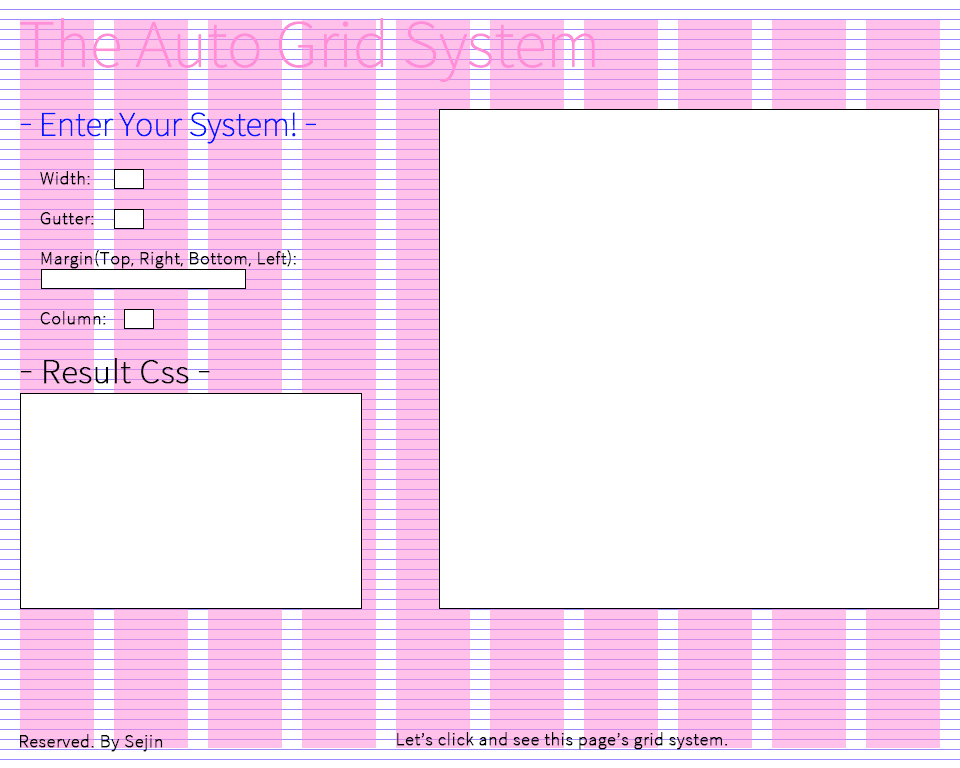
<style>
.page{position:relative;width:960px;height:768px;background:#ffffff}
.page>*{position:absolute;margin:0}
.t1{font:61px "SpoqaHanSans-Thin";letter-spacing:-0.005em;color:#ff8dd8}
.t2{font:31.2px "SpoqaHanSans-Thin";letter-spacing:-0.005em;color:#0618ff}
.t3{font:16px "SpoqaHanSans-Thin";letter-spacing:-0.005em;color:#000000;font-weight:bold}
.t4{font:31.2px "SpoqaHanSans-Thin";letter-spacing:-0.005em;color:#000000;font-weight:bold}
</style>
<div class="page">
<p class="t1" style="left:20px;top:18px;width:575px;height:64px">The Auto Grid System</p>
<p class="t2" style="left:20px;top:112px;width:296px;height:32px">- Enter Your System! -</p>
<p class="t3" style="left:40px;top:171px;width:50px;height:14px">Width:</p>
<p class="t3" style="left:40px;top:212px;width:54px;height:13px">Gutter:</p>
<p class="t3" style="left:41px;top:250px;width:255px;height:19px">Margin(Top, Right, Bottom, Left):</p>
<p class="t3" style="left:40px;top:311px;width:66px;height:14px">Column:</p>
<p class="t4" style="left:20px;top:358px;width:190px;height:26px">- Result Css -</p>
<p class="t3" style="left:20px;top:734px;width:143px;height:18px">Reserved. By Sejin</p>
<p class="t3" style="left:397px;top:732px;width:331px;height:18px">Let’s click and see this page’s grid system.</p>
</div>
